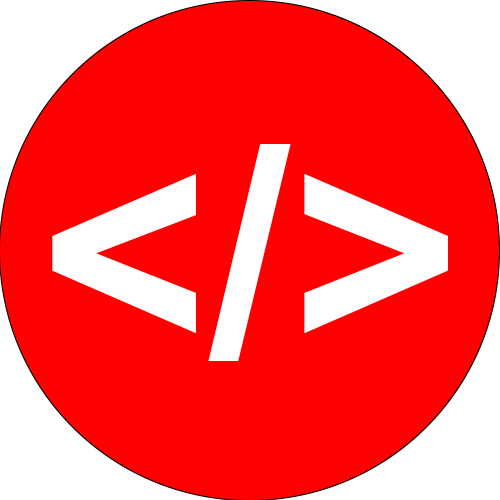
<style>
.page{position:relative;width:500px;height:500px;background:#ff0000}
.page>*{position:absolute;margin:0}
.t1{font:292.1px "Arial-BoldMT";color:#ffffff}
</style>
<div class="page">
<p class="t1" style="left:52px;top:144px;width:396px;height:217px">&lt;/&gt;</p>
</div>
